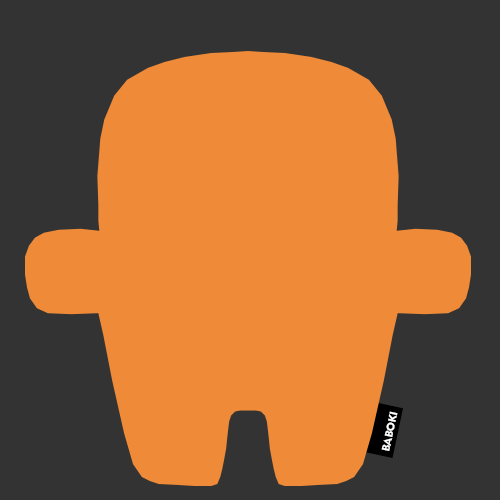
<style>
.page{position:relative;width:500px;height:500px;background:#ef8a38}
.page>*{position:absolute;margin:0}
.t1{font:10.8px "Geometric415BT-BlackA";color:#ffffff}
</style>
<div class="page">
<p class="t1" style="left:381px;top:411px;width:17px;height:40px;rotate:-78deg">BABOKI</p>
</div>
